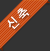
<style>
.page{position:relative;width:50px;height:51px;background:#333333}
.page>*{position:absolute;margin:0}
.t1{font:12.5px "NanumBarunGothicBold";letter-spacing:0.01em;color:#ffffff;text-transform:uppercase}
</style>
<div class="page">
<p class="t1" style="left:7px;top:8px;width:23px;height:22px;rotate:-45deg">신 축</p>
</div>
